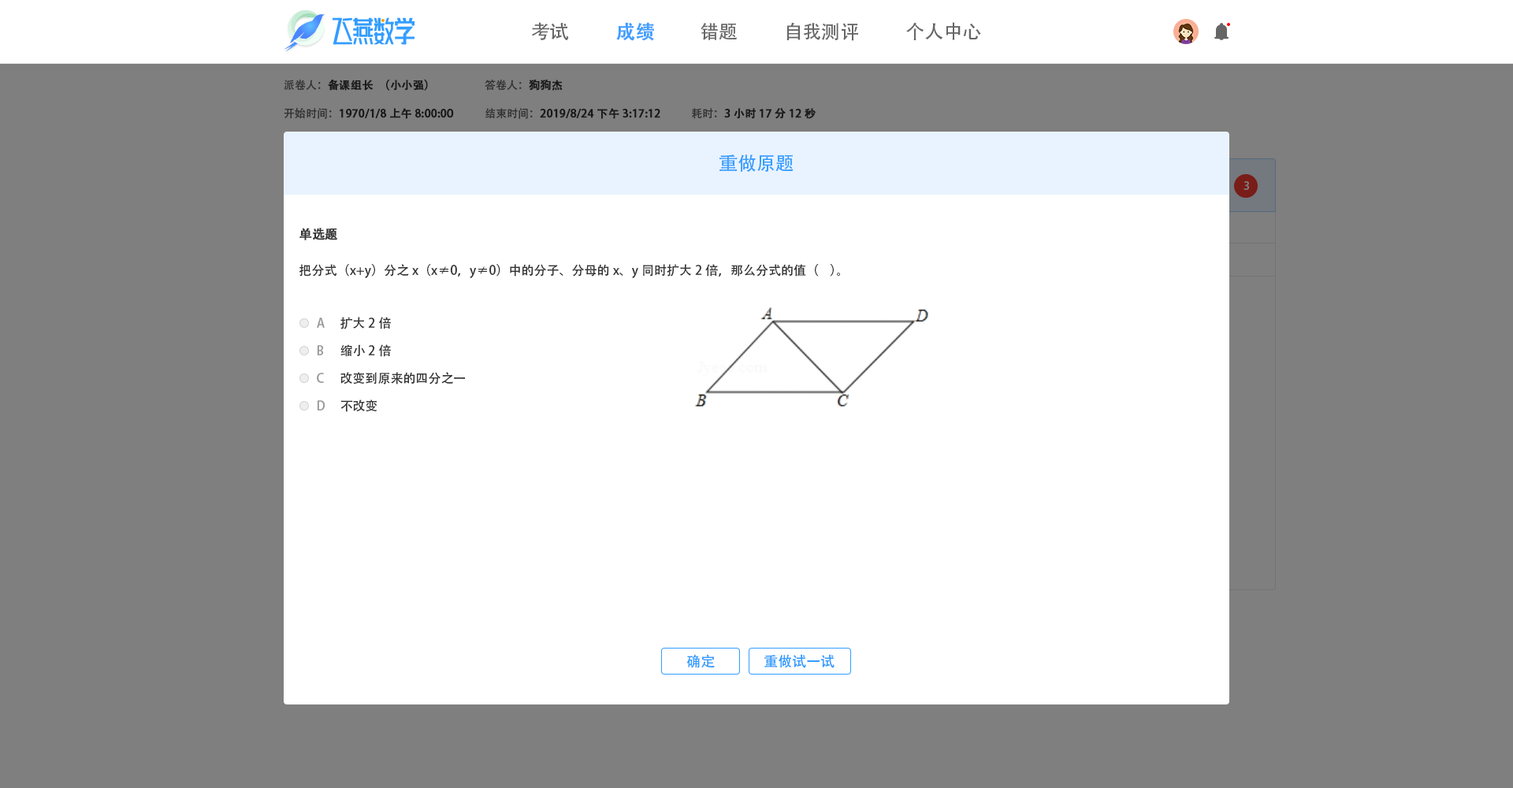
<style>
.page{position:relative;width:1513px;height:788px;background:#ffffff}
.page>*{position:absolute;margin:0}
.t1{font:18.9px "AdobeHeitiStd-Regular";color:#666666}
.t2{font:18.9px "AdobeHeitiStd-Regular";color:#409eff;font-weight:bold}
.t3{font:11px "AdobeHeitiStd-Regular";color:#191919;font-weight:bold}
.t4{font:11px "AdobeHeitiStd-Regular";color:#191919}
.t5{font:11px "AdobeHeitiStd-Regular"}
.t6{font:11px "AdobeHeitiStd-Regular";font-weight:bold}
.t7{font:18.9px "AdobeHeitiStd-Regular";color:#339dff}
.t8{font:11px "AdobeHeitiStd-Regular";color:#7f7f7f}
.t9{font:12.6px "AdobeHeitiStd-Regular";color:#333333;font-weight:bold}
.t10{font:12.6px "AdobeHeitiStd-Regular";color:#333333}
.t11{font:12.6px "AdobeHeitiStd-Regular";color:#999999}
.t12{font:14.2px "AdobeHeitiStd-Regular";color:#339dff}
</style>
<div class="page">
<p class="t1" style="left:531px;top:22px;width:38px;height:18px">考试</p>
<p class="t2" style="left:616px;top:22px;width:38px;height:19px">成绩</p>
<p class="t1" style="left:701px;top:23px;width:36px;height:17px">错题</p>
<p class="t1" style="left:786px;top:22px;width:72px;height:19px">自我测评</p>
<p class="t1" style="left:906px;top:22px;width:75px;height:18px">个人中心</p>
<p class="t3" style="left:284px;top:80px;width:144px;height:11px"><span class="t4">派卷人：</span>备课组长（小小强）</p>
<p class="t5" style="left:485px;top:79px;width:78px;height:12px">答卷人：<span class="t6">狗狗杰</span></p>
<p class="t3" style="left:284px;top:108px;width:170px;height:11px"><span class="t4">开始时间：</span>1970/1/8 上午8:00:00</p>
<p class="t6" style="left:485px;top:108px;width:175px;height:11px"><span class="t5">结束时间：</span>2019/8/24 下午3:17:12</p>
<p class="t3" style="left:692px;top:108px;width:124px;height:11px"><span class="t4">耗时：</span>3小时17分12秒</p>
<p class="t7" style="left:720px;top:154px;width:74px;height:18px">重做原题</p>
<p class="t8" style="left:1244px;top:181px;width:5px;height:9px">3</p>
<p class="t9" style="left:299px;top:228px;width:39px;height:12px">单选题</p>
<p class="t10" style="left:299px;top:264px;width:541px;height:14px">把分式（x+y）分之x（x≠0，y≠0）中的分子、分母的x、y同时扩大2倍，那么分式的值（    ）。</p>
<p class="t11" style="left:317px;top:318px;width:8px;height:10px">A</p>
<p class="t10" style="left:340px;top:317px;width:51px;height:12px">扩大2倍</p>
<p class="t11" style="left:317px;top:345px;width:7px;height:10px">B</p>
<p class="t10" style="left:340px;top:344px;width:51px;height:13px">缩小2倍</p>
<p class="t11" style="left:317px;top:373px;width:7px;height:10px">C</p>
<p class="t10" style="left:340px;top:372px;width:125px;height:13px">改变到原来的四分之一</p>
<p class="t11" style="left:317px;top:400px;width:8px;height:11px">D</p>
<p class="t10" style="left:340px;top:400px;width:37px;height:12px">不改变</p>
<p class="t12" style="left:686px;top:654px;width:29px;height:14px">确定</p>
<p class="t12" style="left:764px;top:654px;width:71px;height:14px">重做试一试</p>
</div>
